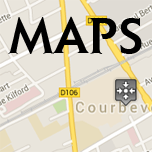
<style>
.page{position:relative;width:152px;height:152px;background:#e9e5dc}
.page>*{position:absolute;margin:0}
.t1{font:52.9px "ITCElan-Regular";color:#000000}
</style>
<div class="page">
<p class="t1" style="left:8px;top:16px;width:134px;height:38px">Maps</p>
</div>
